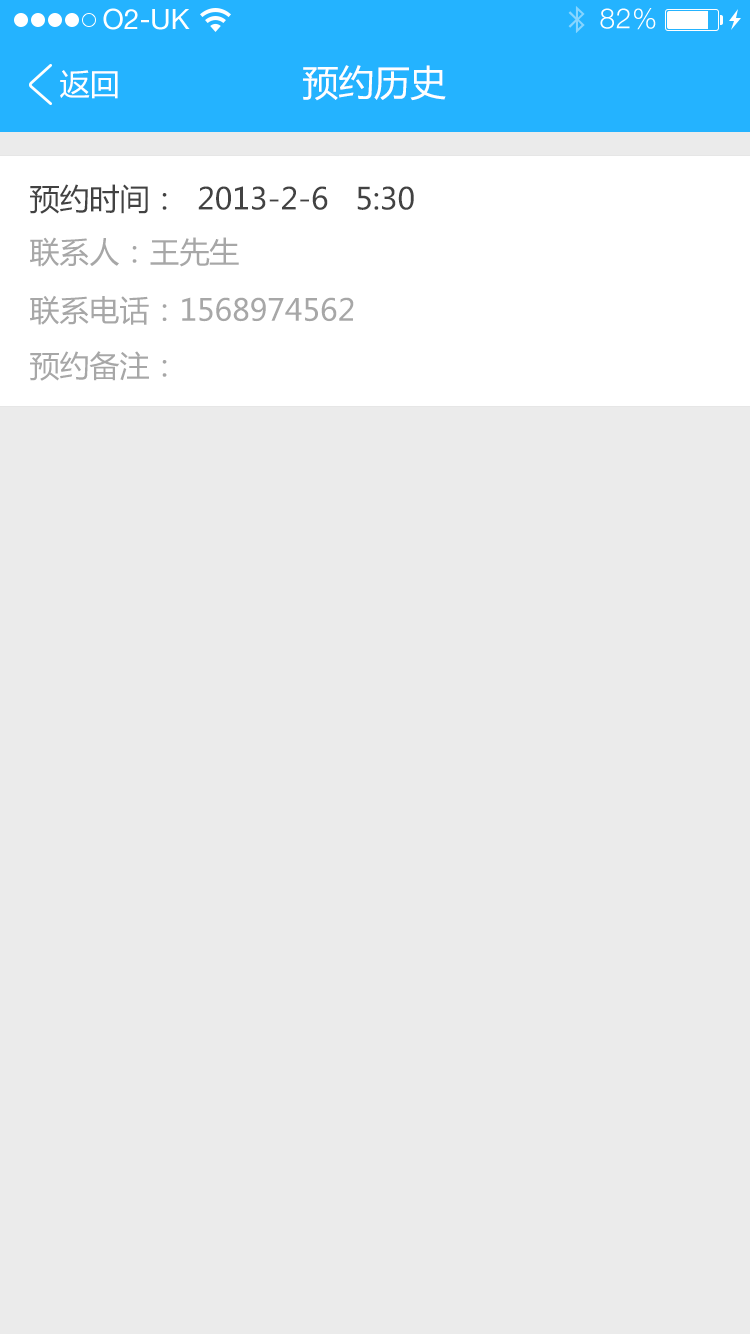
<style>
.page{position:relative;width:750px;height:1334px;background:#ebebeb}
.page>*{position:absolute;margin:0}
.t1{font:36px "MicrosoftYaHei";color:#ffffff}
.t2{font:30px "MicrosoftYaHei";color:#ffffff}
.t3{font:30px "MicrosoftYaHei";color:#424242}
.t4{font:30px/58.3px "MicrosoftYaHei";color:#a7a7a7}
.t5{font:30px "MicrosoftYaHei";color:#a7a7a7}
</style>
<div class="page">
<p class="t1" style="left:303px;top:65px;width:143px;height:36px">预约历史</p>
<p class="t2" style="left:60px;top:70px;width:58px;height:29px">返回</p>
<p class="t3" style="left:30px;top:184px;width:384px;height:30px">预约时间：  2013-2-6   5:30</p>
<p class="t4" style="left:30px;top:237px;width:324px;height:88px">联系人：王先生<br>联系电话：1568974562</p>
<p class="t5" style="left:30px;top:351px;width:137px;height:30px">预约备注：</p>
</div>
